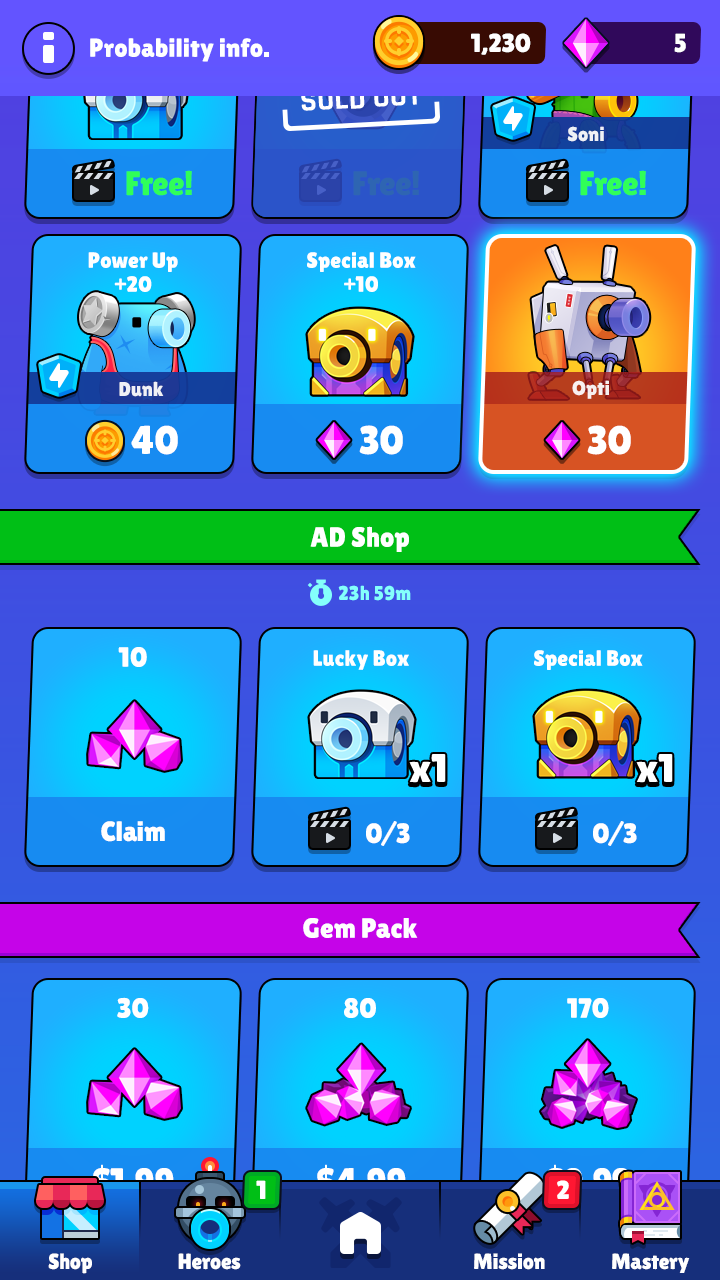
<style>
.page{position:relative;width:720px;height:1280px}
.page>*{position:absolute;margin:0}
.t1{font:26px "LilitaOne";color:#ffffff}
.t2{font:31.2px "Rajdhani-Bold";text-transform:uppercase}
.t3{font:20px "LilitaOne";color:#ffffff}
.t4{font:34px "LilitaOne";color:#30ff58}
.t5{font:34px "LilitaOne";color:#2e65b2}
.t6{font:22px/24px "LilitaOne";color:#ffffff}
.t7{font:40px "LilitaOne";color:#ffffff}
.t8{font:28px "LilitaOne";color:#ffffff}
.t9{font:20px "LilitaOne";color:#84fffb}
.t10{font:22px "LilitaOne";color:#ffffff}
.t11{font:36.7px "LilitaOne"}
</style>
<div class="page">
<p class="t1" style="left:90px;top:38px;width:179px;height:24px">Probability info.</p>
<p class="t2" style="left:301px;top:84px;width:120px;height:27px;rotate:-3deg">sold out</p>
<p class="t3" style="left:567px;top:126px;width:37px;height:16px;opacity:0.9">Soni</p>
<p class="t4" style="left:126px;top:170px;width:66px;height:26px">Free!</p>
<p class="t5" style="left:353px;top:170px;width:66px;height:26px">Free!</p>
<p class="t4" style="left:580px;top:170px;width:66px;height:26px">Free!</p>
<p class="t6" style="left:88px;top:252px;width:90px;height:40px;text-align:center">Power Up<br>+20</p>
<p class="t6" style="left:307px;top:252px;width:109px;height:40px;text-align:center">Special Box<br>+10</p>
<p class="t3" style="left:119px;top:381px;width:45px;height:16px;opacity:0.9">Dunk</p>
<p class="t3" style="left:572px;top:380px;width:37px;height:19px;opacity:0.9">Opti</p>
<p class="t7" style="left:131px;top:425px;width:47px;height:30px">40</p>
<p class="t7" style="left:359px;top:425px;width:44px;height:30px">30</p>
<p class="t7" style="left:587px;top:425px;width:44px;height:30px">30</p>
<p class="t8" style="left:310px;top:526px;width:99px;height:26px">AD Shop</p>
<p class="t9" style="left:338px;top:585px;width:73px;height:16px">23h 59m</p>
<p class="t8" style="left:118px;top:647px;width:29px;height:20px">10</p>
<p class="t10" style="left:313px;top:650px;width:96px;height:20px">Lucky Box</p>
<p class="t10" style="left:534px;top:650px;width:109px;height:20px">Special Box</p>
<p class="t7" style="left:409px;top:754px;width:37px;height:29px">x1</p>
<p class="t7" style="left:636px;top:754px;width:37px;height:29px">x1</p>
<p class="t8" style="left:101px;top:821px;width:64px;height:21px">Claim</p>
<p class="t8" style="left:366px;top:821px;width:44px;height:25px">0/3</p>
<p class="t8" style="left:593px;top:821px;width:44px;height:25px">0/3</p>
<p class="t8" style="left:303px;top:918px;width:115px;height:20px">Gem Pack</p>
<p class="t8" style="left:117px;top:997px;width:32px;height:21px">30</p>
<p class="t8" style="left:344px;top:998px;width:32px;height:20px">80</p>
<p class="t8" style="left:567px;top:998px;width:42px;height:20px">170</p>
<p class="t11" style="left:93px;top:1164px;width:81px;height:34px">$1,99</p>
<p class="t11" style="left:317px;top:1164px;width:89px;height:34px">$4,99</p>
<p class="t11" style="left:546px;top:1164px;width:85px;height:34px">$9,99</p>
</div>
